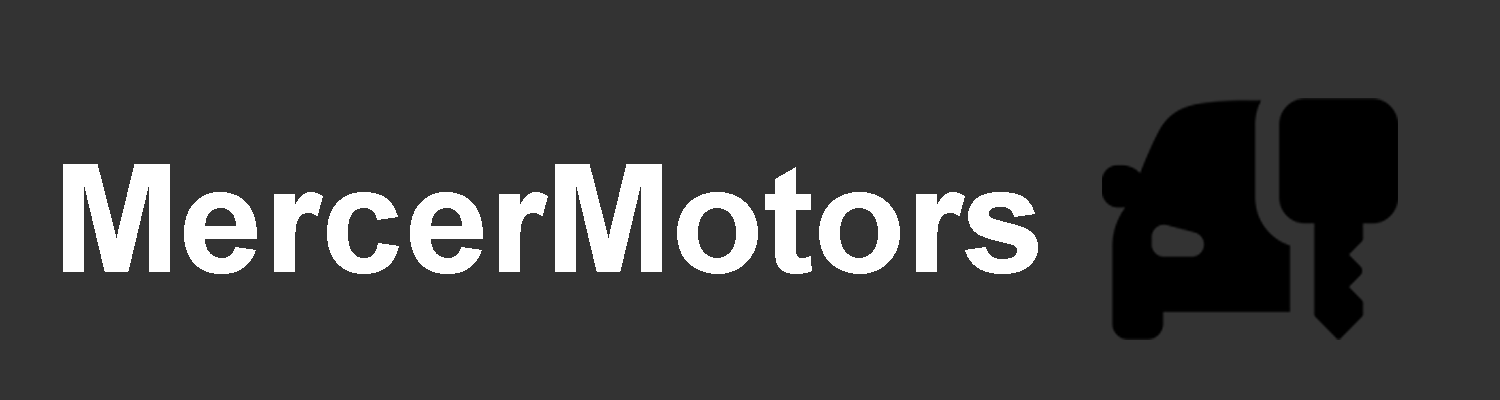
<style>
.page{position:relative;width:1500px;height:400px;background:#333333}
.page>*{position:absolute;margin:0}
.t1{font:150px "Arial-BoldMT";color:#ffffff}
</style>
<div class="page">
<p class="t1" style="left:63px;top:164px;width:975px;height:110px">MercerMotors</p>
</div>
